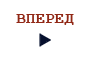
<style>
.page{position:relative;width:90px;height:62px;background:#ffffff}
.page>*{position:absolute;margin:0}
.t1{font:16px "CourierNewPS-BoldMT";color:#912816}
</style>
<div class="page">
<p class="t1" style="left:16px;top:14px;width:58px;height:11px">ВПЕРЕД</p>
</div>
